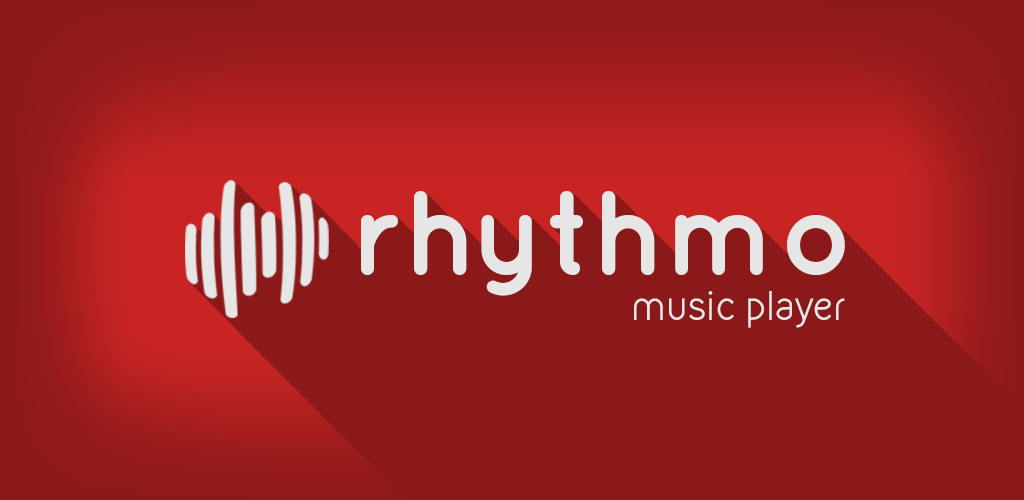
<style>
.page{position:relative;width:1024px;height:500px;background:#8c1919}
.page>*{position:absolute;margin:0}
.t1{font:120px "Quicksand-Bold";color:#e6e6e6}
.t2{font:36px "Kirvy-Regular";color:#e6e6e6}
</style>
<div class="page">
<p class="t1" style="left:361px;top:191px;width:484px;height:105px">rhythmo</p>
<p class="t2" style="left:634px;top:291px;width:211px;height:37px">music player</p>
</div>
